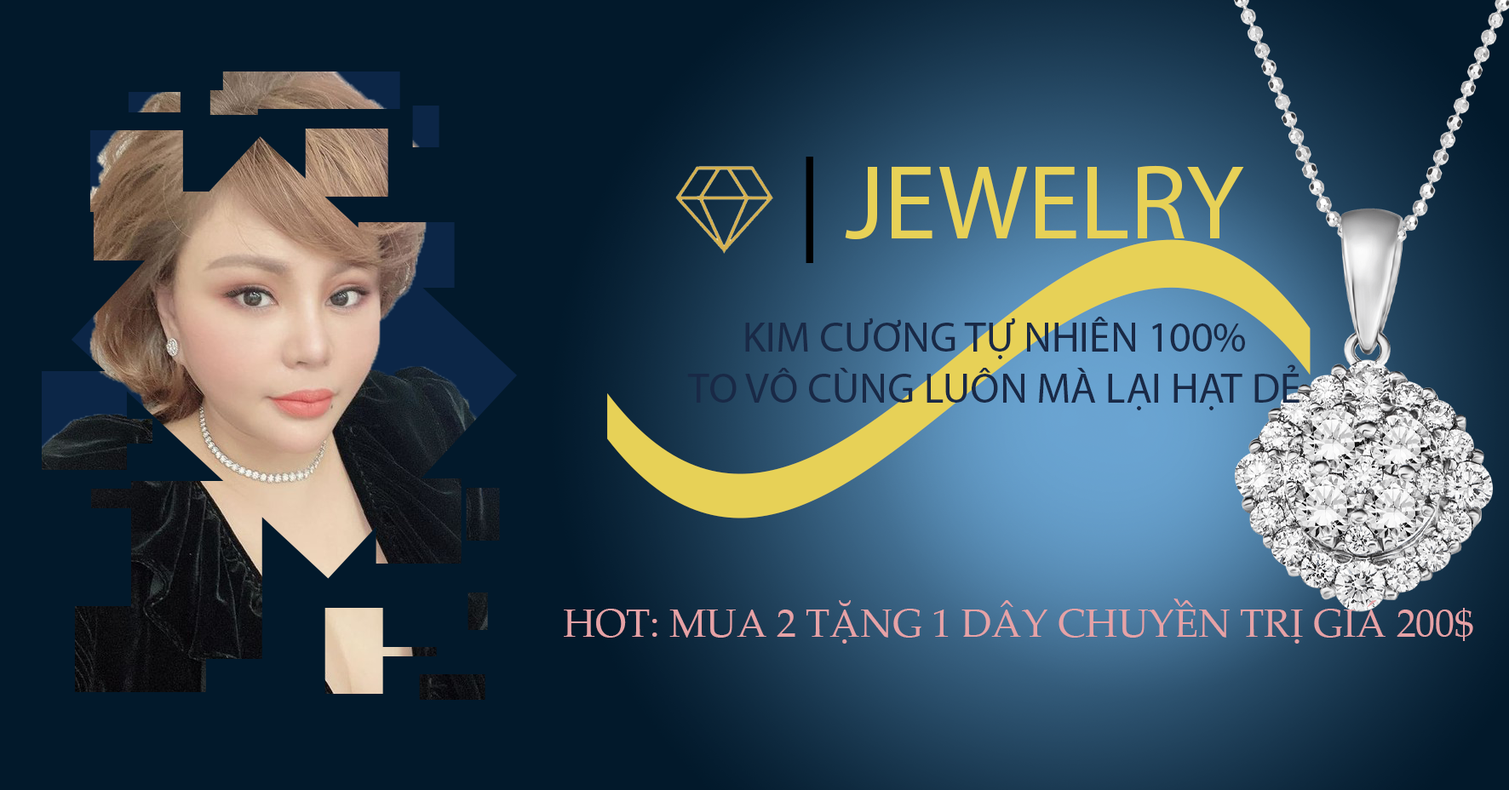
<style>
.page{position:relative;width:1509px;height:790px;background:#02192b}
.page>*{position:absolute;margin:0}
.t1{font:106.4px "MyriadPro-Regular";color:#000000}
.t2{font:106.4px "MyriadPro-Regular";color:#e7d157}
.t3{font:746.3px "MyriadPro-Regular";color:#e7d157}
.t4{font:42.6px "MyriadPro-Regular";color:#192946}
.t5{font:39px "PalatinoLinotype-Roman";color:#e6a2a6}
</style>
<div class="page">
<p class="t1" style="left:806px;top:157px;width:7px;height:106px">|</p>
<p class="t2" style="left:845px;top:165px;width:399px;height:74px">JEWELRY</p>
<p class="t3" style="left:607px;top:239px;width:704px;height:280px">-</p>
<p class="t4" style="left:687px;top:317px;width:612px;height:93px;text-align:center">KIM CƯƠNG TỰ NHIÊN 100%<br>TO VÔ CÙNG LUÔN MÀ LẠI HẠT DẺ</p>
<p class="t5" style="left:564px;top:599px;width:909px;height:45px">HOT: MUA 2 TẶNG 1 DÂY CHUYỀN TRỊ GIÁ 200$</p>
</div>
